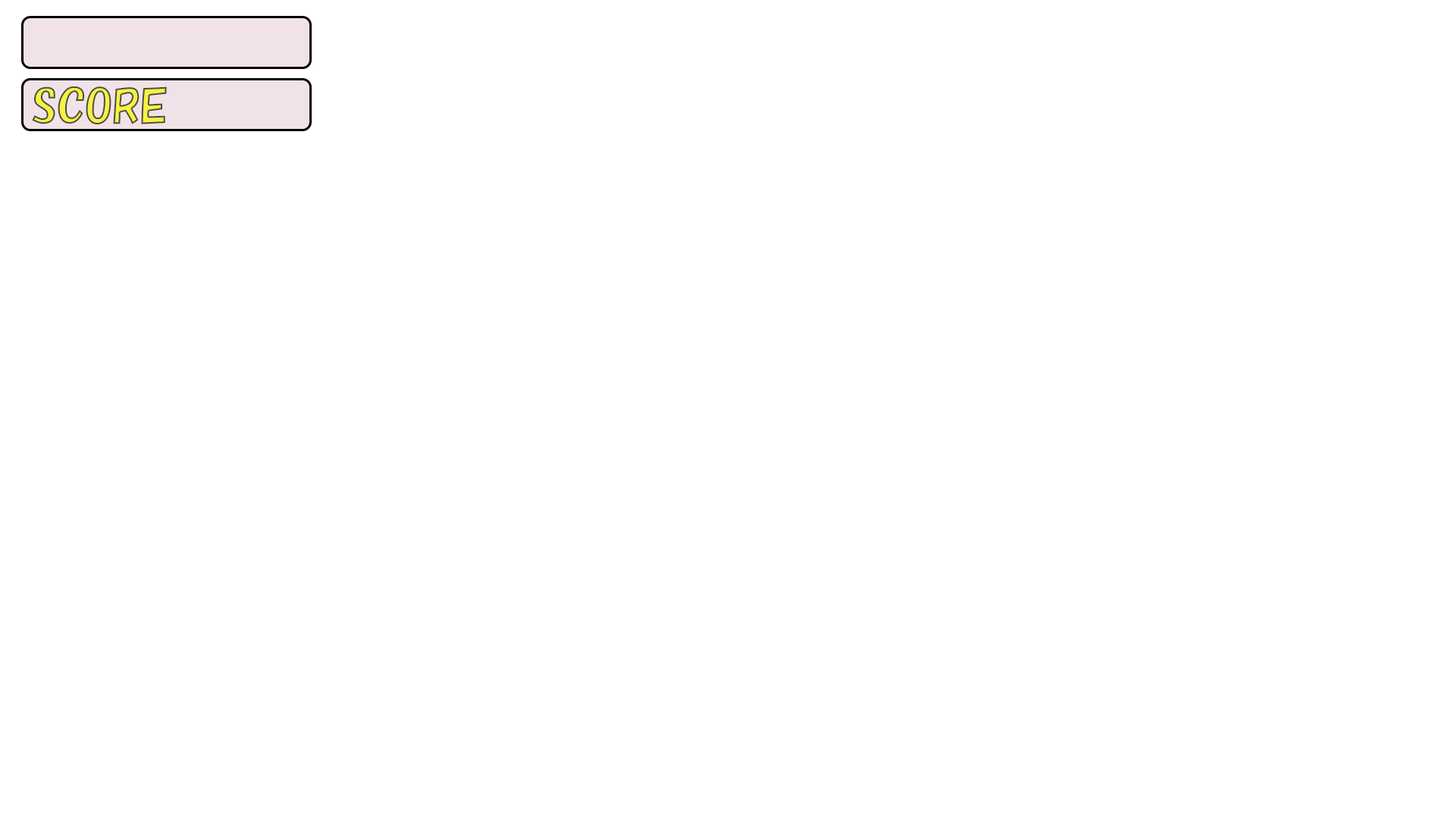
<style>
.page{position:relative;width:1456px;height:819px;background:#ffffff}
.page>*{position:absolute;margin:0}
.t1{font:45.5px "HGPSoeiKakupoptai"}
</style>
<div class="page">
<p class="t1" style="left:32px;top:86px;width:135px;height:38px">SCORE</p>
</div>
